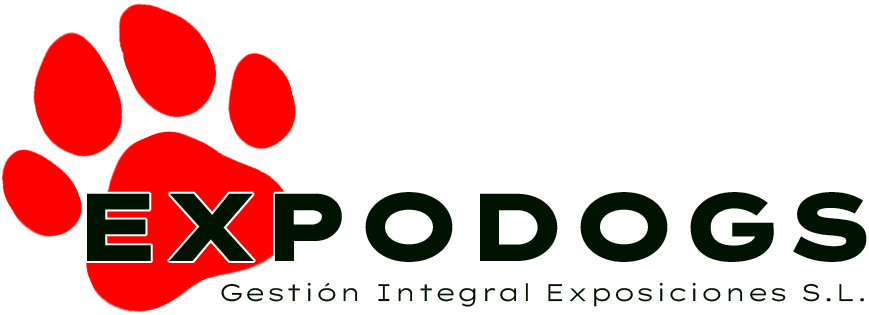
<style>
.page{position:relative;width:869px;height:315px;background:#ffffff}
.page>*{position:absolute;margin:0}
.t1{font:96px "LexendZetta-ExtraBold";color:#001300}
.t2{font:24px "LexendZetta-Light";color:#001300}
</style>
<div class="page">
<p class="t1" style="left:87px;top:192px;width:780px;height:70px">EXPODOGS</p>
<p class="t2" style="left:221px;top:282px;width:643px;height:25px">Gestión Integral Exposiciones S.L.</p>
</div>
